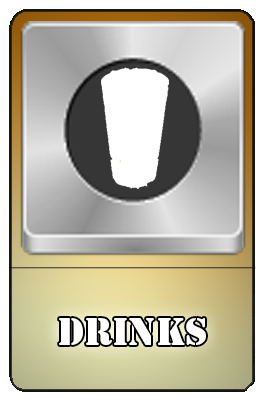
<style>
.page{position:relative;width:263px;height:402px}
.page>*{position:absolute;margin:0}
.t1{font:36px "StencilStd";color:#ffffff}
</style>
<div class="page">
<p class="t1" style="left:59px;top:318px;width:147px;height:27px">DRINKS</p>
</div>
